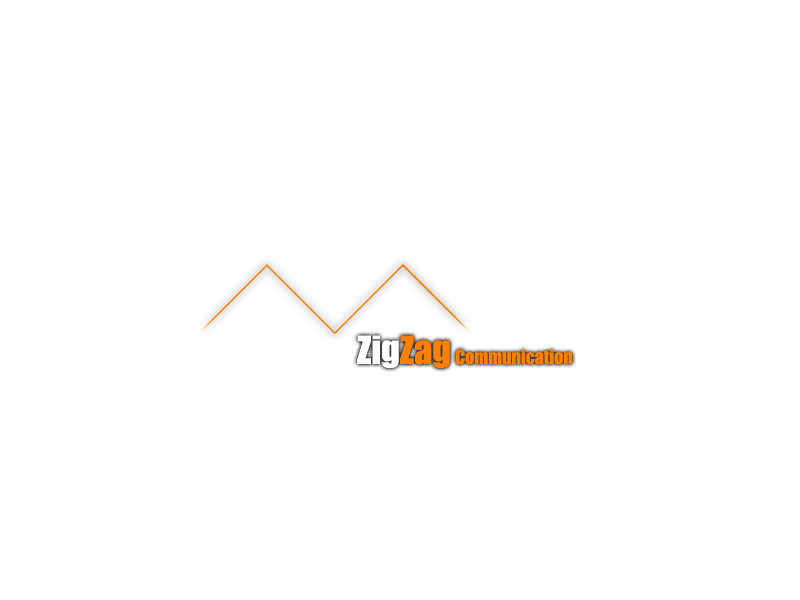
<style>
.page{position:relative;width:800px;height:600px;background:#ffffff}
.page>*{position:absolute;margin:0}
.t1{font:18px "Impact";color:#ff8000}
.t2{font:36px "Impact";color:#ffffff}
.t3{font:36px "Impact";color:#ff8000}
</style>
<div class="page">
<p class="t1" style="left:357px;top:335px;width:216px;height:34px"><span class="t2">Zig</span><span class="t3">Zag </span>Communication</p>
</div>
